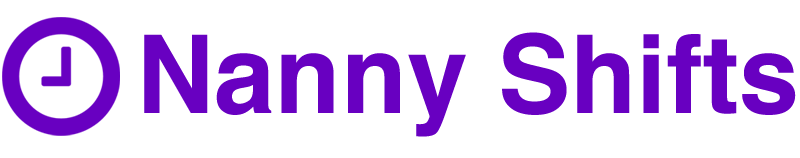
<style>
.page{position:relative;width:800px;height:158px;background:#ffffff}
.page>*{position:absolute;margin:0}
.t1{font:108.5px "Helvetica-Bold";color:#6800c1}
</style>
<div class="page">
<p class="t1" style="left:144px;top:32px;width:652px;height:105px">Nanny Shifts</p>
</div>
